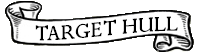
<style>
.page{position:relative;width:204px;height:52px;background:#ffffff}
.page>*{position:absolute;margin:0}
.t1{font:24px "Perpetua";color:#000000}
</style>
<div class="page">
<p class="t1" style="left:35px;top:16px;width:143px;height:25px">TARGET HULL</p>
</div>
